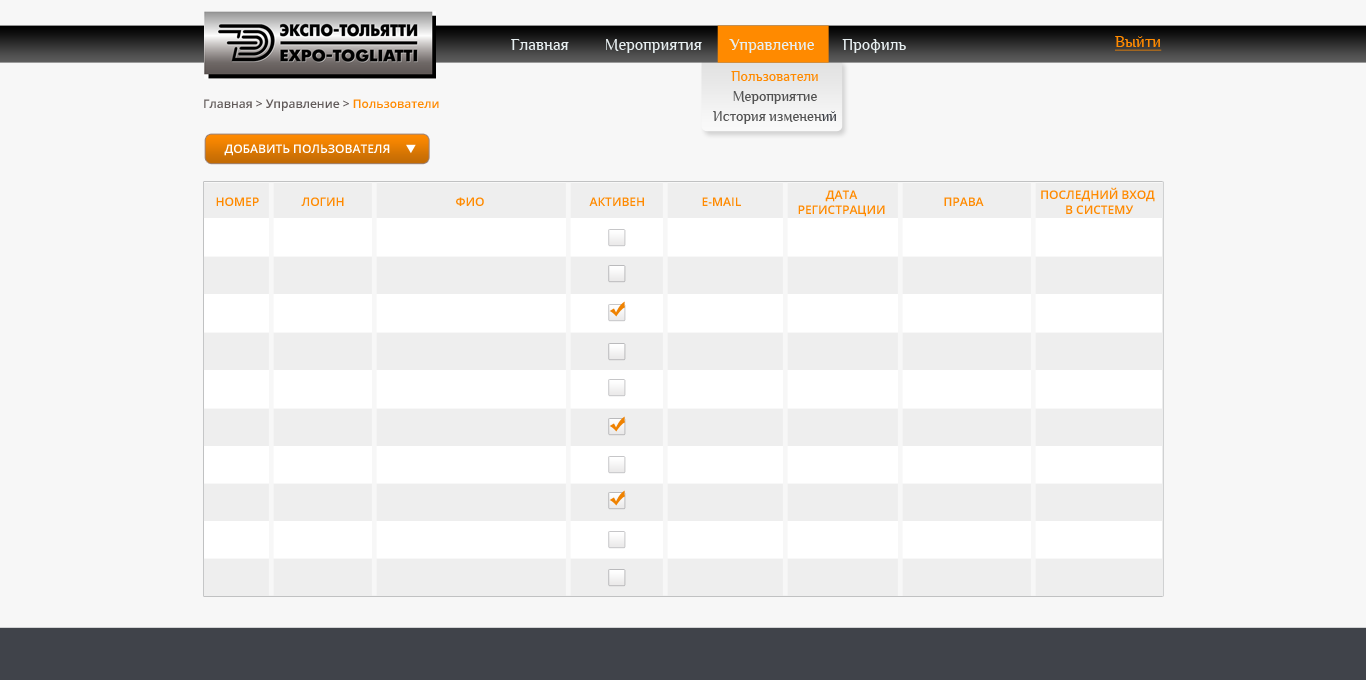
<style>
.page{position:relative;width:1366px;height:680px;background:#f7f7f7}
.page>*{position:absolute;margin:0}
.t1{font:16.5px "Philosopher";color:#e7eff1}
.t2{font:16px "Philosopher";color:#ff8a00;text-decoration:underline}
.t3{font:14.4px/20px "Philosopher";color:#525252}
.t4{font:14.4px/20px "Philosopher";color:#ff8a00}
.t5{font:14.4px/20px "Philosopher";color:#40434a}
.t6{font:12px "OpenSans-Semibold";color:#615a59}
.t7{font:12px "OpenSans-Semibold";color:#ff8a00}
.t8{font:12px "OpenSans-Semibold";color:#ffffff;text-transform:uppercase}
.t9{font:12px "OpenSans-Semibold";color:#ff8a00;text-transform:uppercase}
</style>
<div class="page">
<p class="t1" style="left:511px;top:39px;width:395px;height:14px">Главная         Мероприятия       Управление       Профиль</p>
<p class="t2" style="left:1115px;top:36px;width:47px;height:15px">Выйти</p>
<p class="t3" style="left:713px;top:71px;width:123px;height:53px;text-align:center"><span class="t4">Пользователи<br></span>Мероприятие<br>История изменен<span class="t5">ий</span></p>
<p class="t6" style="left:204px;top:99px;width:235px;height:12px">Главная &gt; Управление &gt; <span class="t7">Пользователи</span></p>
<p class="t8" style="left:224px;top:144px;width:166px;height:12px">добавить пользователя</p>
<p class="t9" style="left:216px;top:197px;width:43px;height:9px">номер</p>
<p class="t9" style="left:301px;top:197px;width:43px;height:9px">логин</p>
<p class="t9" style="left:456px;top:197px;width:28px;height:9px">фио</p>
<p class="t9" style="left:589px;top:197px;width:55px;height:9px">активен</p>
<p class="t9" style="left:702px;top:197px;width:39px;height:9px">E-mail</p>
<p class="t9" style="left:798px;top:190px;width:87px;height:27px;text-align:center">дата<br>регистрации</p>
<p class="t9" style="left:944px;top:197px;width:40px;height:9px">права</p>
<p class="t9" style="left:1041px;top:187px;width:114px;height:27px;text-align:center">последний вход<br> в систему</p>
</div>
